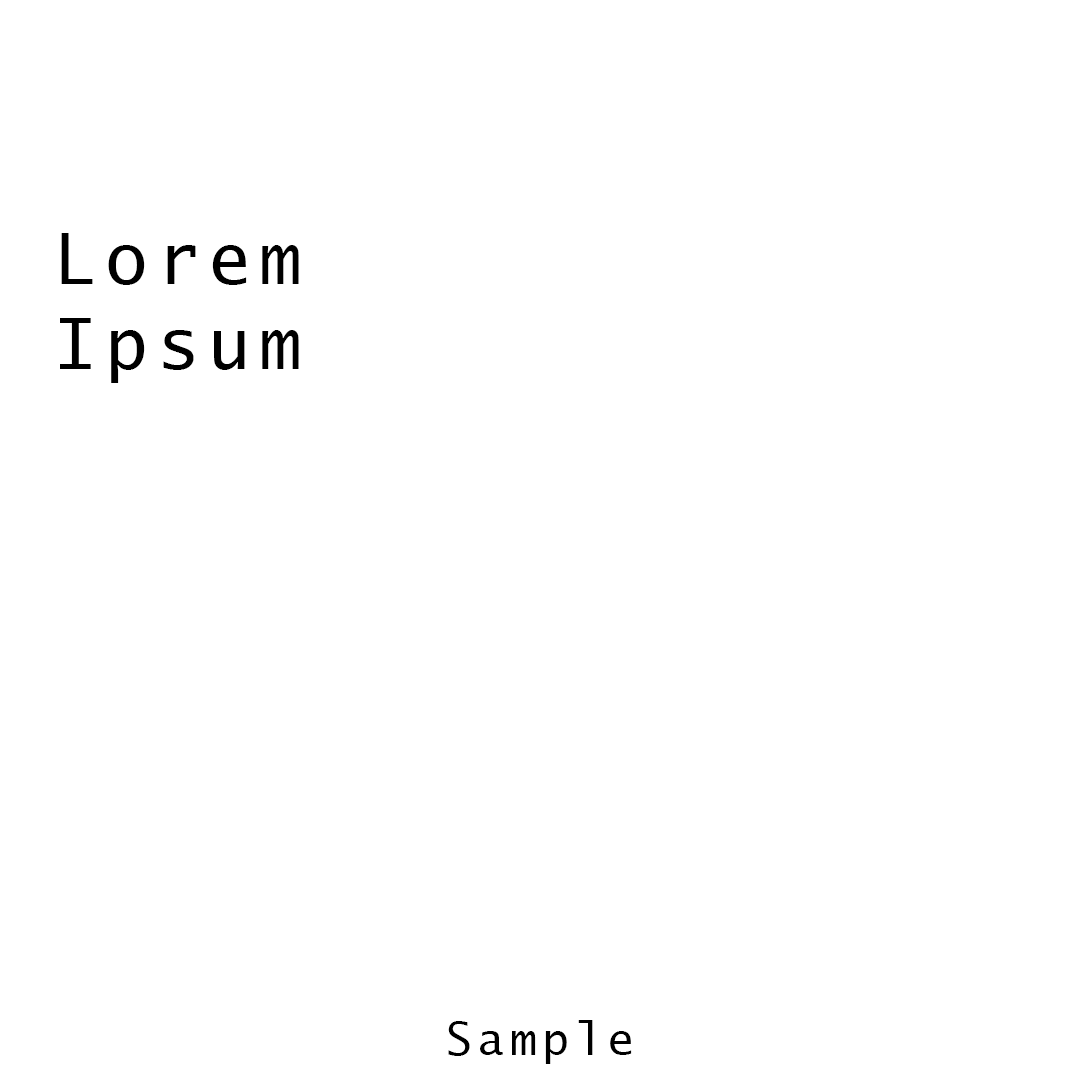
<style>
.page{position:relative;width:1080px;height:1080px;background:#ffffff}
.page>*{position:absolute;margin:0}
.t1{font:71px "LucidaSans-Typewriter";letter-spacing:0.12em;color:#000000}
.t2{font:45px "LucidaSans-Typewriter";letter-spacing:0.12em;color:#000000}
</style>
<div class="page">
<p class="t1" style="left:60px;top:233px;width:239px;height:150px">Lorem Ipsum</p>
<p class="t2" style="left:448px;top:1020px;width:184px;height:44px">Sample</p>
</div>
